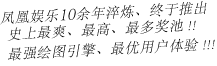
<style>
.page{position:relative;width:217px;height:66px;background:#ffffff}
.page>*{position:absolute;margin:0}
.t1{font:14px/20px "AdobeSongStd-Light";letter-spacing:0.05em;color:#000000;font-style:italic}
.t2{font:18px/20px "AdobeSongStd-Light";color:#000000;font-style:italic}
</style>
<div class="page">
<p class="t1" style="left:0px;top:1px;width:215px;height:60px;rotate:-3deg">凤凰娱乐<span class="t2">10</span>余年淬炼、终于推出<br>  史上最爽、最高、最多奖池 !!<br>  最强绘图引擎、最优用户体验 !!!</p>
</div>
